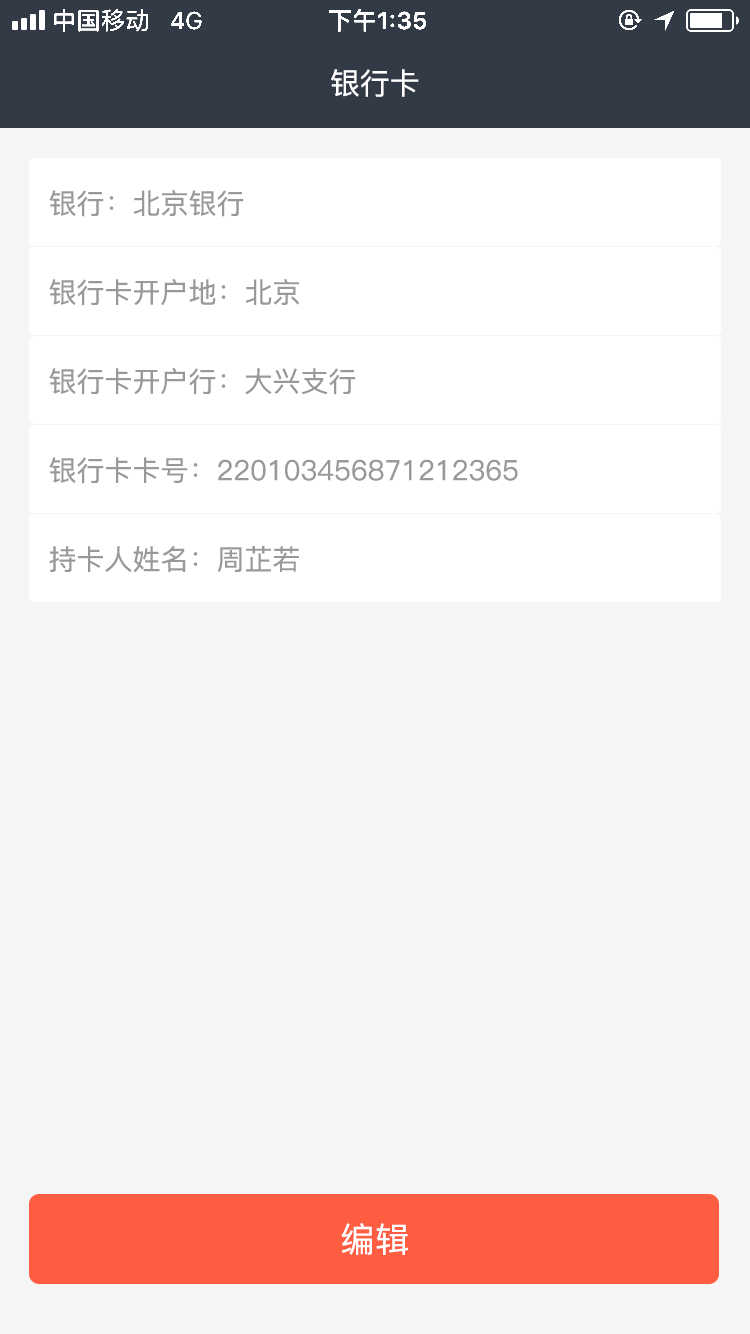
<style>
.page{position:relative;width:750px;height:1334px;background:#f5f5f5}
.page>*{position:absolute;margin:0}
.t1{font:30px "PingFang-SC-Medium";color:#ffffff}
.t2{font:28px "PingFang-SC-Medium";color:#999999}
.t3{font:34px "PingFang-SC-Medium";letter-spacing:0.02em;color:#ffffff}
</style>
<div class="page">
<p class="t1" style="left:331px;top:69px;width:88px;height:28px">银行卡</p>
<p class="t2" style="left:49px;top:190px;width:195px;height:27px">银行：北京银行</p>
<p class="t2" style="left:49px;top:279px;width:250px;height:27px">银行卡开户地：北京</p>
<p class="t2" style="left:49px;top:368px;width:307px;height:27px">银行卡开户行：大兴支行</p>
<p class="t2" style="left:49px;top:457px;width:469px;height:27px">银行卡卡号：220103456871212365</p>
<p class="t2" style="left:49px;top:546px;width:250px;height:27px">持卡人姓名：周芷若</p>
<p class="t3" style="left:341px;top:1223px;width:67px;height:32px">编辑</p>
</div>
